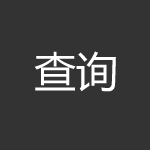
<style>
.page{position:relative;width:150px;height:150px;background:#333333}
.page>*{position:absolute;margin:0}
.t1{font:41.7px "MicrosoftYaHei";color:#ffffff}
</style>
<div class="page">
<p class="t1" style="left:34px;top:51px;width:82px;height:41px">查询</p>
</div>
